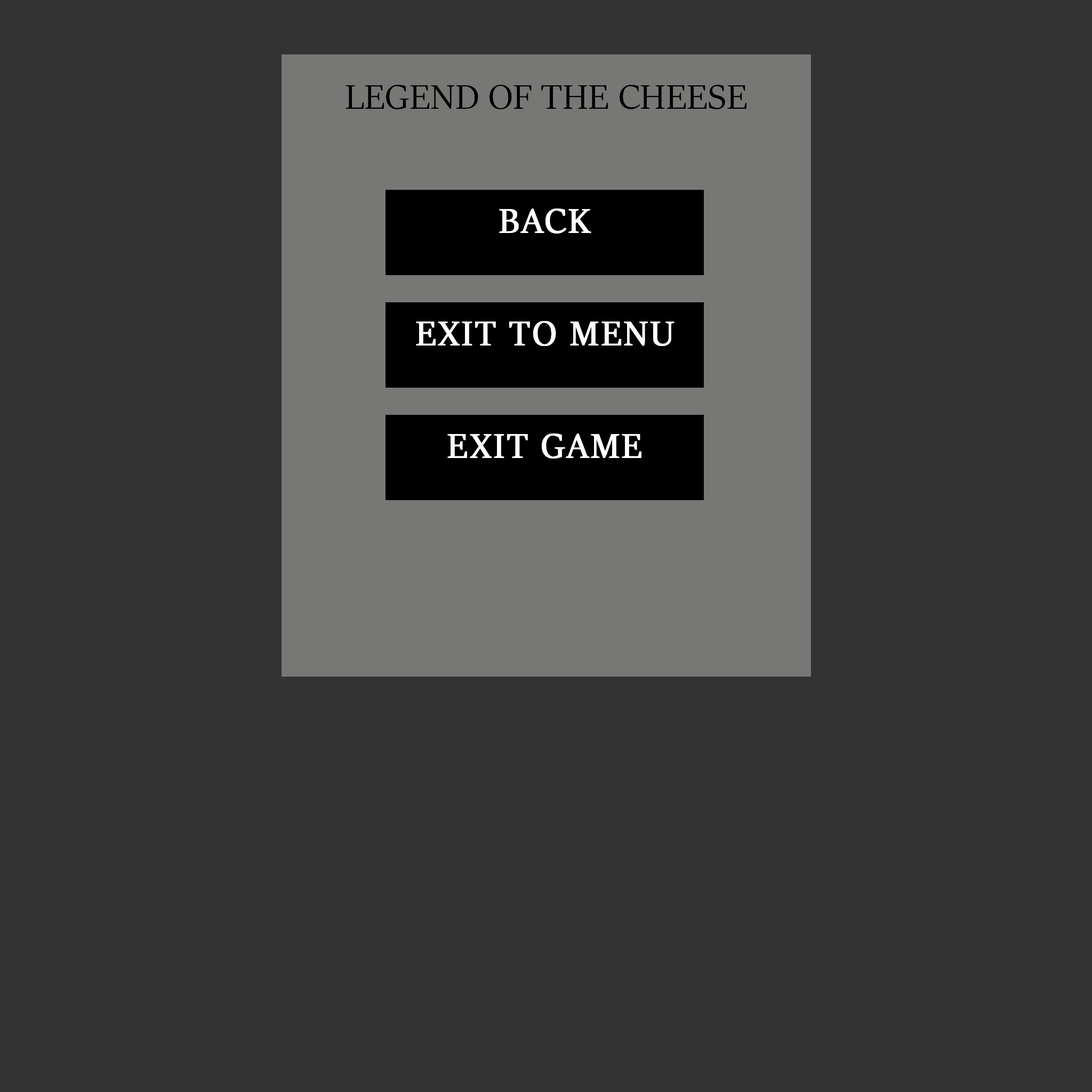
<style>
.page{position:relative;width:1092px;height:1092px;background:#333333}
.page>*{position:absolute;margin:0}
.t1{font:38.4px "SitkaBanner";letter-spacing:0.005em;color:#000000;text-transform:uppercase}
.t2{font:38.4px "SitkaBanner";letter-spacing:0.04em;color:#ffffff;text-transform:uppercase;font-weight:bold}
</style>
<div class="page">
<p class="t1" style="left:346px;top:85px;width:400px;height:24px">Legend of the cheese</p>
<p class="t2" style="left:499px;top:208px;width:92px;height:26px">Back</p>
<p class="t2" style="left:416px;top:321px;width:258px;height:25px">exit to menu</p>
<p class="t2" style="left:447px;top:433px;width:194px;height:26px">exit game</p>
</div>
